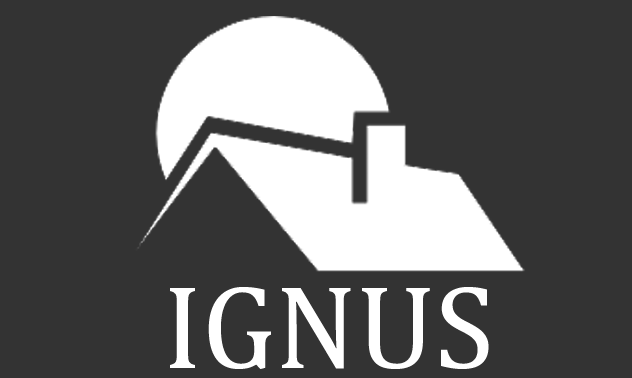
<style>
.page{position:relative;width:632px;height:378px;background:#333333}
.page>*{position:absolute;margin:0}
.t1{font:120px "CambriaMath";color:#ffffff}
</style>
<div class="page">
<p class="t1" style="left:170px;top:287px;width:319px;height:82px">IGNUS</p>
</div>
